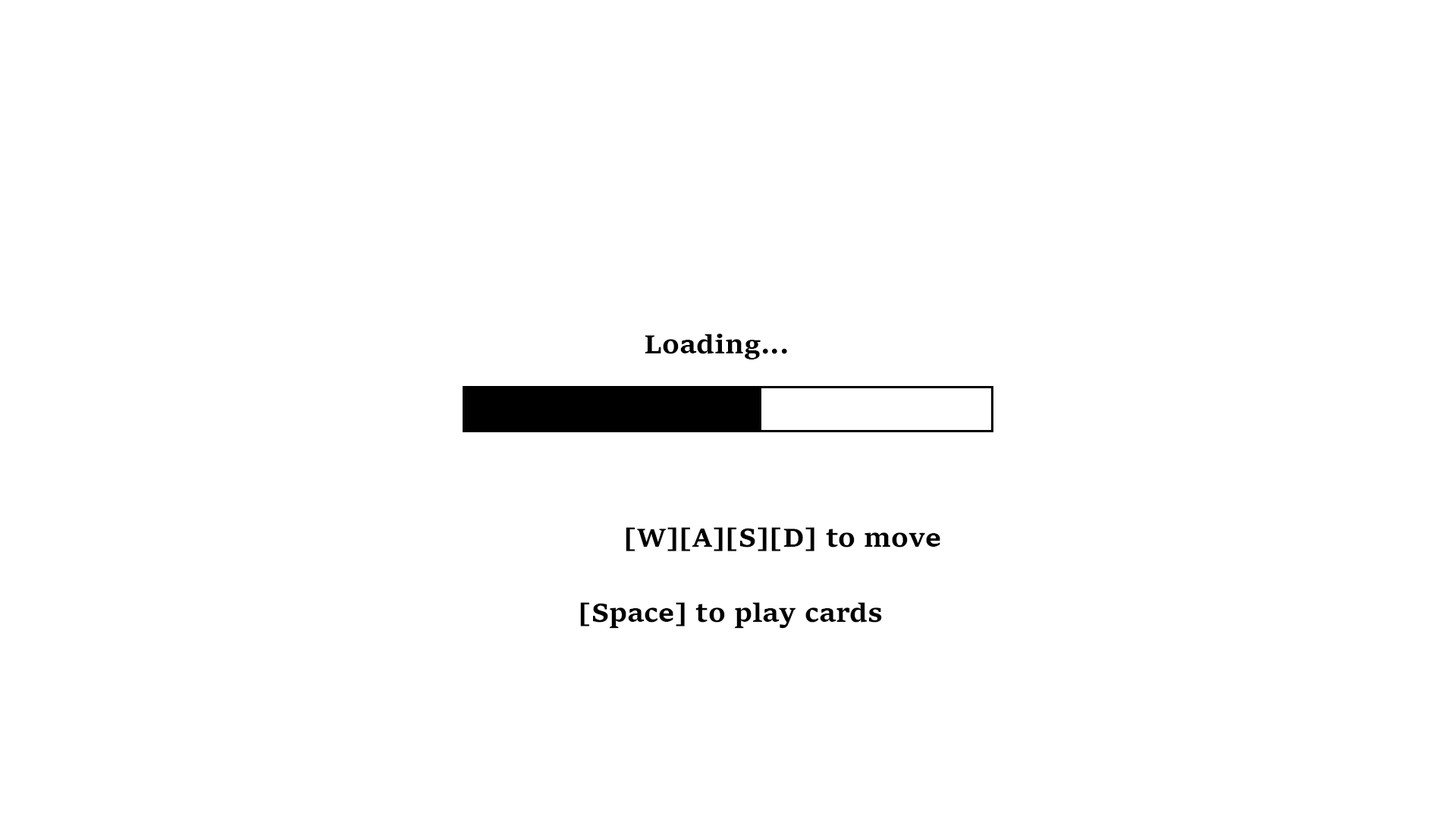
<style>
.page{position:relative;width:1456px;height:819px;background:#ffffff}
.page>*{position:absolute;margin:0}
.t1{font:27.3px "Sitka-SmallBold";color:#000000}
</style>
<div class="page">
<p class="t1" style="left:645px;top:334px;width:142px;height:25px">Loading...</p>
<p class="t1" style="left:626px;top:527px;width:314px;height:24px">[W][A][S][D] to move</p>
<p class="t1" style="left:580px;top:602px;width:302px;height:27px">[Space] to play cards</p>
</div>
